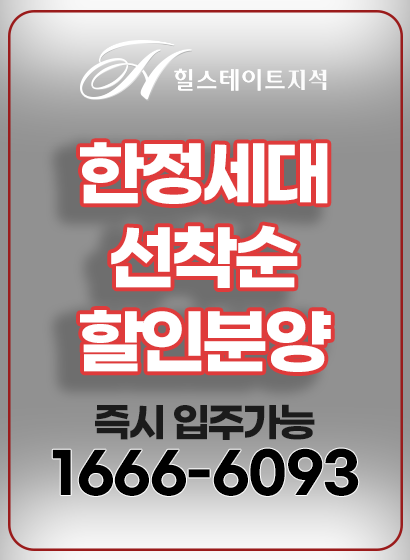
<style>
.page{position:relative;width:410px;height:560px}
.page>*{position:absolute;margin:0}
.t1{font:70.2px "GmarketSansTTFBold";letter-spacing:-0.075em;color:#ffffff}
.t2{font:39.9px "GmarketSansTTFBold";letter-spacing:-0.075em;color:#1b1b1b}
.t3{font:55.5px "GmarketSansTTFBold";letter-spacing:-0.01em;color:#000000}
</style>
<div class="page">
<p class="t1" style="left:80px;top:142px;width:251px;height:230px;text-align:center">한정세대<br>선착순<br>할인분양</p>
<p class="t2" style="left:95px;top:404px;width:220px;height:36px">즉시 입주가능</p>
<p class="t3" style="left:52px;top:448px;width:307px;height:48px">1666-6093</p>
</div>
